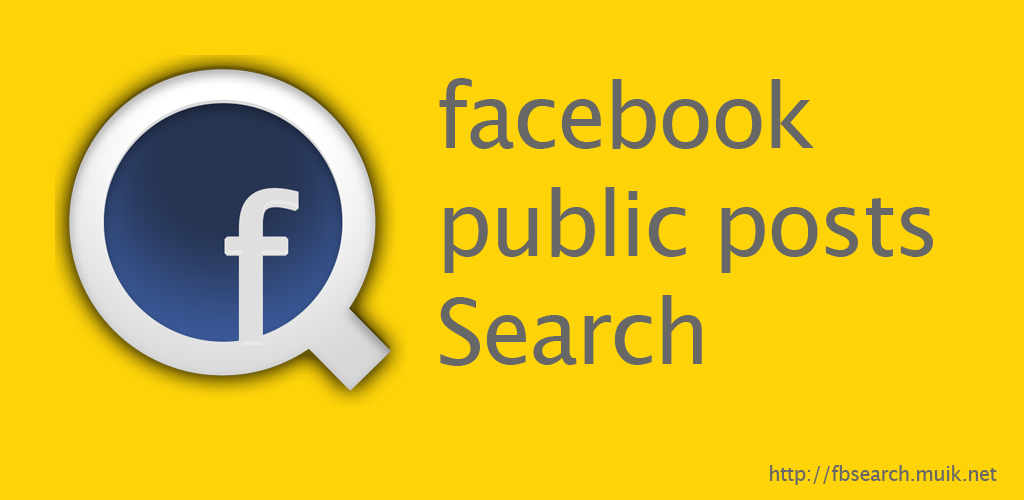
<style>
.page{position:relative;width:1024px;height:500px;background:#fed409}
.page>*{position:absolute;margin:0}
.t1{font:90px "LucidaGrande";letter-spacing:-0.03em;color:#676767}
.t2{font:20px "LucidaGrande";letter-spacing:-0.03em;color:#676767}
</style>
<div class="page">
<p class="t1" style="left:439px;top:78px;width:494px;height:288px">facebook<br>public posts<br>Search</p>
<p class="t2" style="left:770px;top:465px;width:227px;height:20px">http://fbsearch.muik.net</p>
</div>
